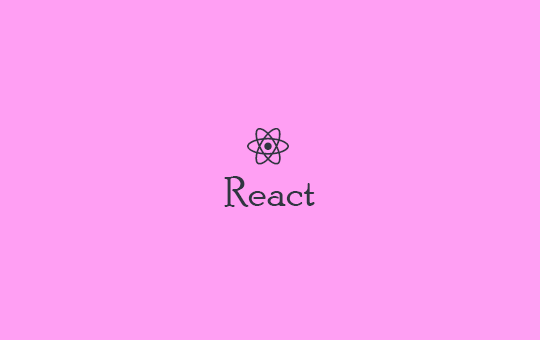
<style>
.page{position:relative;width:540px;height:340px;background:#ff9ff3}
.page>*{position:absolute;margin:0}
.t1{font:42px "PoorRichard-Regular";color:#2f3640}
</style>
<div class="page">
<p class="t1" style="left:224px;top:176px;width:91px;height:31px">React</p>
</div>
